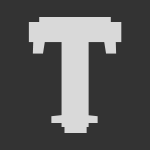
<style>
.page{position:relative;width:150px;height:150px;background:#333333}
.page>*{position:absolute;margin:0}
.t1{font:144px "Unispace-Bold";color:#d9d9d9}
.t2{font:144px "Verdana-Bold";color:#d9d9d9}
.t3{font:144px "SourceSerif4Roman-Semibold";color:#d9d9d9}
</style>
<div class="page">
<p class="t1" style="left:39px;top:17px;width:72px;height:116px">T</p>
<p class="t2" style="left:28px;top:22px;width:94px;height:105px">T</p>
<p class="t3" style="left:32px;top:27px;width:85px;height:96px">T</p>
</div>
